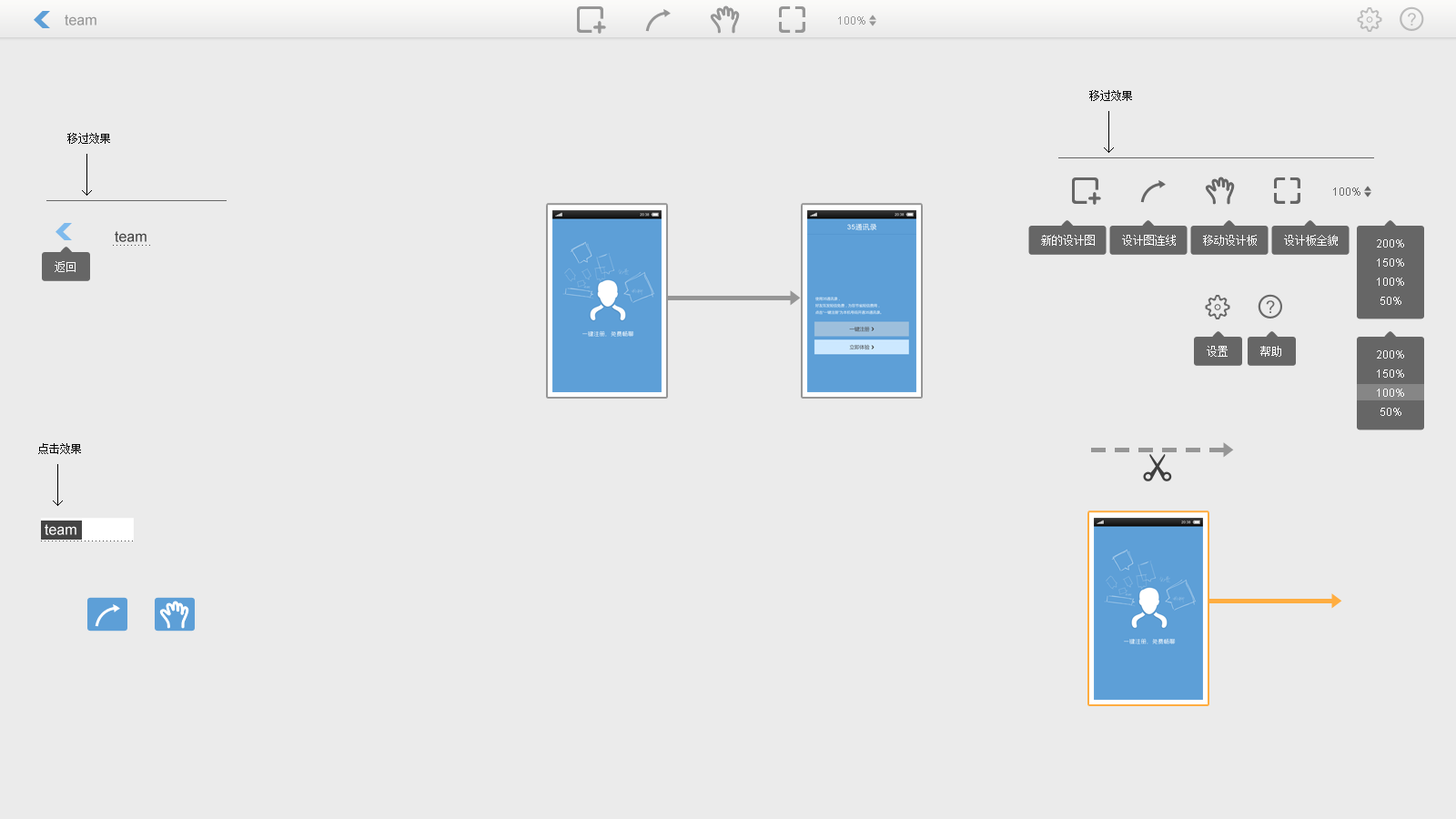
<style>
.page{position:relative;width:1456px;height:819px;background:#ebebeb}
.page>*{position:absolute;margin:0}
.t1{font:14.6px "ArialMT";color:#969696}
.t2{font:10.9px "SimSun";color:#000000}
.t3{font:14.6px "ArialMT";color:#444444}
.t4{font:10.9px "SimSun";color:#ffffff}
.t5{font:10.9px "ArialMT";color:#ffffff}
.t6{font:54.6px "ArialMT";letter-spacing:0.1em;color:#969696}
.t7{font:14.6px "ArialMT";color:#ffffff}
</style>
<div class="page">
<p class="t1" style="left:65px;top:15px;width:31px;height:10px">team</p>
<p class="t2" style="left:1089px;top:90px;width:43px;height:11px">移过效果</p>
<p class="t2" style="left:67px;top:133px;width:43px;height:11px">移过效果</p>
<p class="t3" style="left:115px;top:231px;width:32px;height:11px">team</p>
<p class="t3" style="left:113px;top:245px;width:37px;height:1px">...........</p>
<p class="t4" style="left:1041px;top:235px;width:54px;height:11px">新的设计图</p>
<p class="t4" style="left:1122px;top:235px;width:54px;height:11px">设计图连线</p>
<p class="t4" style="left:1203px;top:235px;width:54px;height:11px">移动设计板</p>
<p class="t4" style="left:1284px;top:235px;width:54px;height:11px">设计板全貌</p>
<p class="t5" style="left:1377px;top:239px;width:27px;height:9px">200%</p>
<p class="t4" style="left:55px;top:261px;width:21px;height:11px">返回</p>
<p class="t5" style="left:1377px;top:258px;width:27px;height:9px">150%</p>
<p class="t5" style="left:1377px;top:278px;width:27px;height:8px">100%</p>
<p class="t5" style="left:1380px;top:297px;width:21px;height:8px">50%</p>
<p class="t4" style="left:1207px;top:346px;width:21px;height:11px">设置</p>
<p class="t4" style="left:1260px;top:346px;width:21px;height:11px">帮助</p>
<p class="t5" style="left:1377px;top:350px;width:27px;height:9px">200%</p>
<p class="t5" style="left:1377px;top:369px;width:27px;height:9px">150%</p>
<p class="t5" style="left:1377px;top:389px;width:27px;height:8px">100%</p>
<p class="t5" style="left:1380px;top:408px;width:21px;height:8px">50%</p>
<p class="t2" style="left:38px;top:443px;width:43px;height:11px">点击效果</p>
<p class="t6" style="left:1091px;top:448px;width:133px;height:4px">------</p>
<p class="t7" style="left:45px;top:524px;width:31px;height:11px">team</p>
<p class="t3" style="left:41px;top:541px;width:92px;height:0px">..........................</p>
</div>
